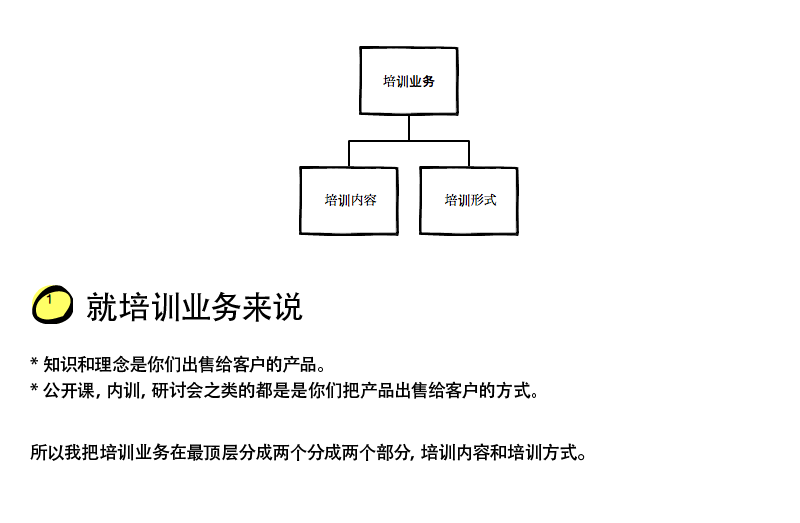
<style>
.page{position:relative;width:800px;height:523px;background:#ffffff}
.page>*{position:absolute;margin:0}
.t1{font:18px/26px "AdobeHeitiStd-Regular";color:#000000}
.t2{font:36px/36px "AdobeHeitiStd-Regular";color:#000000}
.t3{font:32px/36px "AdobeHeitiStd-Regular";color:#000000}
.t4{font:24px/36px "AdobeHeitiStd-Regular";color:#000000}
</style>
<div class="page">
<p class="t1" style="left:30px;top:291px;width:555px;height:170px"><span class="t2">       </span><span class="t3">就培训业务来说<br></span><br>* 知识和理念是你们出售给客户的产品。<br>* 公开课，内训，研讨会之类的都是是你们把产品出售给客户的方式。<br><br>所以我把培训业务在最顶层分成两个分成两个部分，培训内容和培训方式<span class="t4">。</span></p>
</div>
